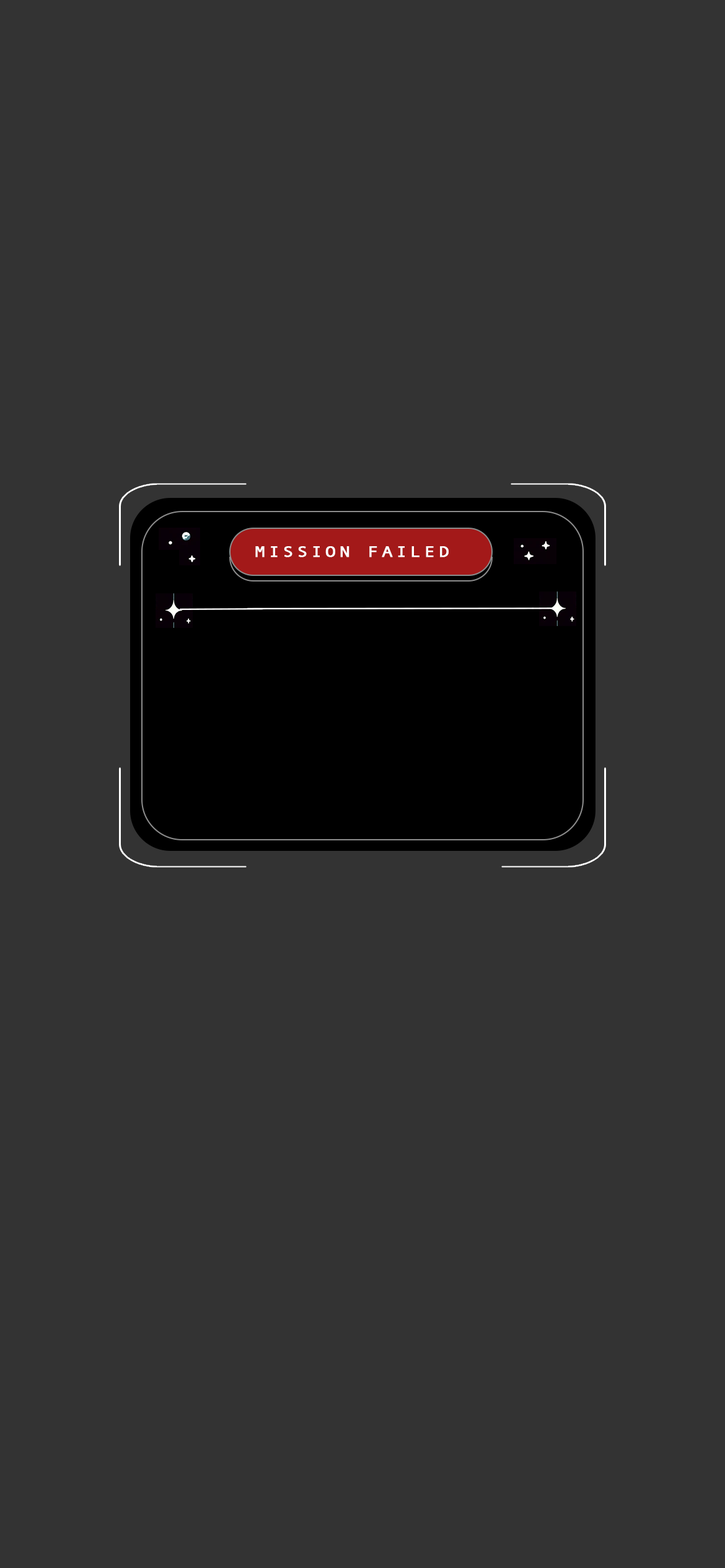
<style>
.page{position:relative;width:725px;height:1568px;background:#333333}
.page>*{position:absolute;margin:0}
.t1{font:14.9px "AndaleMono";letter-spacing:0.14em;color:#ffffff;font-weight:bold;scale:1.24 1}
</style>
<div class="page">
<p class="t1" style="left:255px;top:546px;width:193px;height:11px">MISSION FAILED</p>
</div>
